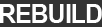
<style>
.page{position:relative;width:102px;height:27px;background:#333333}
.page>*{position:absolute;margin:0}
.t1{font:25.9px "Arial-BoldMT";letter-spacing:-0.04em;color:#ffffff;scale:0.96 1}
</style>
<div class="page">
<p class="t1" style="left:0px;top:4px;width:102px;height:19px">REBUILD</p>
</div>
